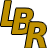
<style>
.page{position:relative;width:48px;height:48px;background:#ffffff}
.page>*{position:absolute;margin:0}
.t1{font:35px "DejaVuSansCondensed-BoldOblique";color:#bf9000}
</style>
<div class="page">
<p class="t1" style="left:0px;top:0px;width:18px;height:26px">L</p>
<p class="t1" style="left:11px;top:8px;width:23px;height:26px">B</p>
<p class="t1" style="left:25px;top:22px;width:22px;height:26px">R</p>
</div>
